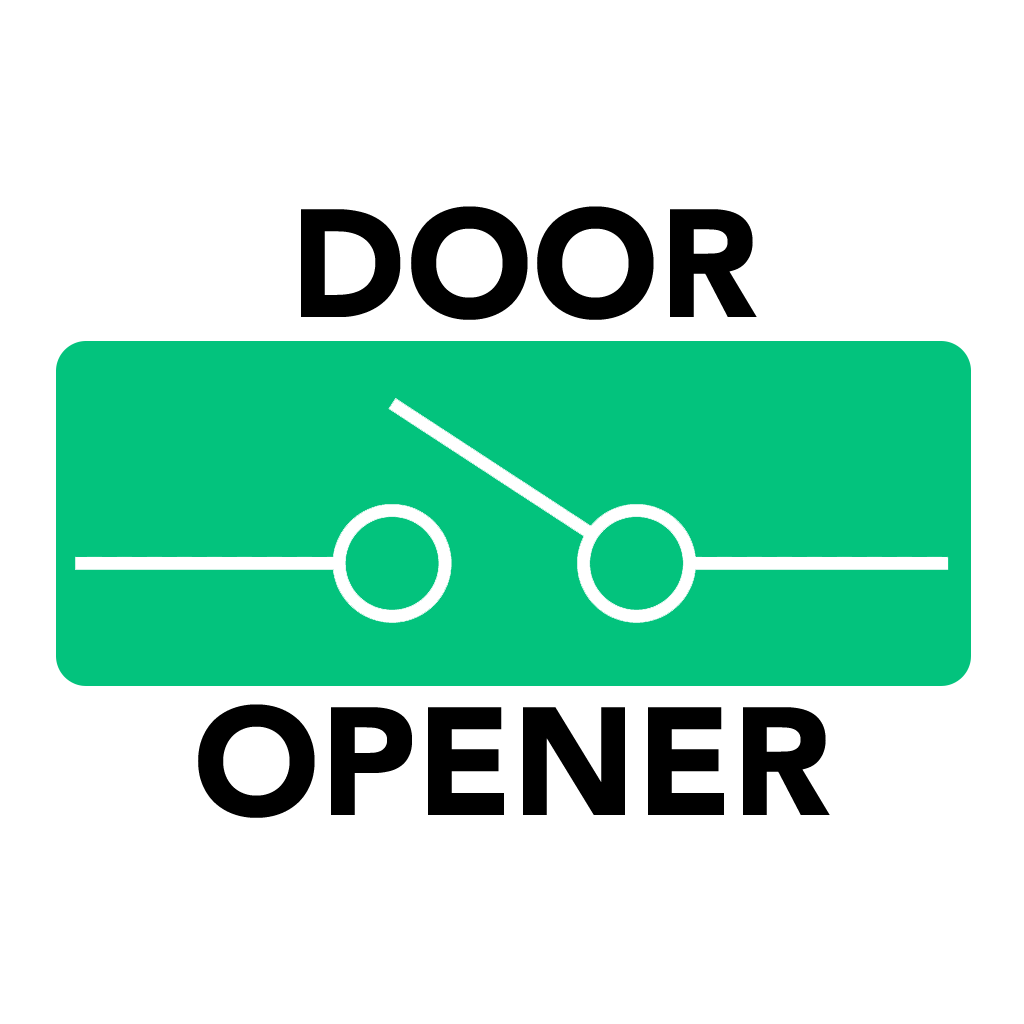
<style>
.page{position:relative;width:1024px;height:1024px;background:#ffffff}
.page>*{position:absolute;margin:0}
.t1{font:152.3px "Avenir-Black";color:#000000;text-transform:uppercase}
</style>
<div class="page">
<p class="t1" style="left:301px;top:206px;width:456px;height:114px">DOOR</p>
<p class="t1" style="left:198px;top:704px;width:632px;height:114px">OPENER</p>
</div>
